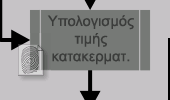
<style>
.page{position:relative;width:170px;height:100px;background:#c6c3c6}
.page>*{position:absolute;margin:0}
.t1{font:14.7px "ArialMT";color:#3b3c3b}
</style>
<div class="page">
<p class="t1" style="left:47px;top:15px;width:87px;height:50px;text-align:center">Υπολογισμός<br>τιμής<br>κατακερματ.</p>
</div>
